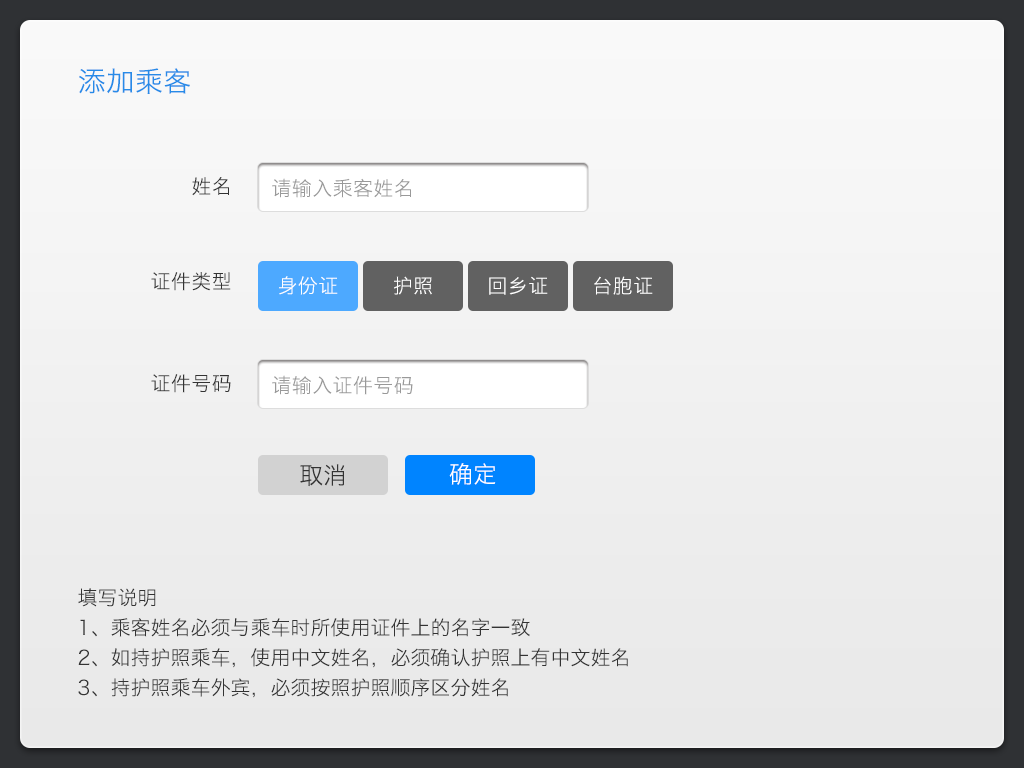
<style>
.page{position:relative;width:1024px;height:768px}
.page>*{position:absolute;margin:0}
.t1{font:28px "HiraginoSansGB-W3";letter-spacing:0.02em;color:#278be8}
.t2{font:20px "HiraginoSansGB-W3";letter-spacing:0.02em;color:#333333}
.t3{font:20px "HiraginoSansGB-W3";letter-spacing:0.02em;color:#999999}
.t4{font:20px "HiraginoSansGB-W3";letter-spacing:0.02em;color:#ffffff}
.t5{font:24px "HiraginoSansGB-W3";color:#333333}
.t6{font:24px "HiraginoSansGB-W3";color:#ffffff}
.t7{font:20px/30px "HiraginoSansGB-W3";color:#333333}
</style>
<div class="page">
<p class="t1" style="left:79px;top:68px;width:111px;height:26px">添加乘客</p>
<p class="t2" style="left:192px;top:177px;width:37px;height:19px">姓名</p>
<p class="t3" style="left:272px;top:178px;width:139px;height:20px">请输入乘客姓名</p>
<p class="t2" style="left:151px;top:272px;width:80px;height:19px">证件类型</p>
<p class="t4" style="left:279px;top:276px;width:59px;height:19px">身份证</p>
<p class="t4" style="left:394px;top:276px;width:38px;height:19px">护照</p>
<p class="t4" style="left:489px;top:276px;width:59px;height:19px">回乡证</p>
<p class="t4" style="left:594px;top:276px;width:59px;height:19px">台胞证</p>
<p class="t2" style="left:151px;top:374px;width:80px;height:19px">证件号码</p>
<p class="t3" style="left:272px;top:375px;width:141px;height:20px">请输入证件号码</p>
<p class="t5" style="left:300px;top:464px;width:45px;height:23px">取消</p>
<p class="t6" style="left:449px;top:463px;width:47px;height:22px">确定</p>
<p class="t7" style="left:78px;top:588px;width:550px;height:110px">填写说明<br>1、乘客姓名必须与乘车时所使用证件上的名字一致<br>2、如持护照乘车，使用中文姓名，必须确认护照上有中文姓名<br>3、持护照乘车外宾，必须按照护照顺序区分姓名</p>
</div>
